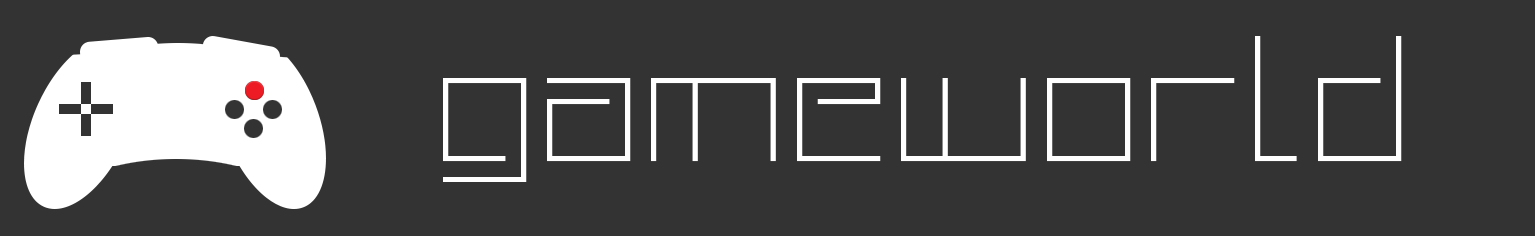
<style>
.page{position:relative;width:1535px;height:236px;background:#333333}
.page>*{position:absolute;margin:0}
.t1{font:208.3px "SquaredDisplay";color:#ffffff}
</style>
<div class="page">
<p class="t1" style="left:443px;top:36px;width:959px;height:146px">gameworld</p>
</div>
